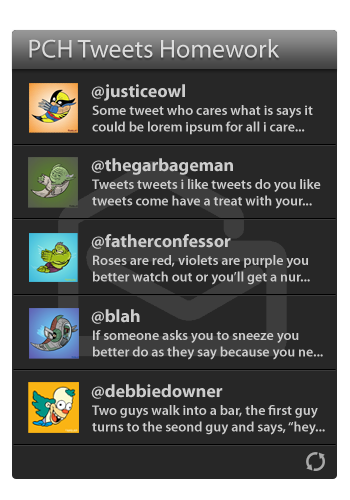
<style>
.page{position:relative;width:350px;height:500px;background:#272727}
.page>*{position:absolute;margin:0}
.t1{font:26px "MyriadPro-Regular";color:#dcdcdc}
.t2{font:18px "MyriadPro-Bold";color:#cccccc}
.t3{font:14px/16.6px "MyriadPro-Semibold";color:#cccccc}
</style>
<div class="page">
<p class="t1" style="left:29px;top:39px;width:251px;height:19px">PCH Tweets Homework</p>
<p class="t2" style="left:91px;top:84px;width:94px;height:17px">@justiceowl</p>
<p class="t3" style="left:92px;top:105px;width:221px;height:30px">Some tweet who cares what is says it<br>could be lorem ipsum for all i care...</p>
<p class="t2" style="left:91px;top:158px;width:142px;height:17px">@thegarbageman</p>
<p class="t3" style="left:92px;top:179px;width:229px;height:30px">Tweets tweets i like tweets do you like<br>tweets come have a treat with your...</p>
<p class="t2" style="left:91px;top:234px;width:140px;height:15px">@fatherconfessor</p>
<p class="t3" style="left:93px;top:255px;width:217px;height:30px">Roses are red, violets are purple you<br>better watch out or you’ll get a nur...</p>
<p class="t2" style="left:91px;top:309px;width:49px;height:15px">@blah</p>
<p class="t3" style="left:93px;top:330px;width:230px;height:30px">If someone asks you to sneeze you<br>better do as they say because you ne...</p>
<p class="t2" style="left:91px;top:384px;width:132px;height:15px">@debbiedowner</p>
<p class="t3" style="left:92px;top:405px;width:233px;height:30px">Two guys walk into a bar, the first guy<br>turns to the seond guy and says, “hey...</p>
</div>
